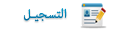
<style>
.page{position:relative;width:115px;height:32px;background:#ffffff}
.page>*{position:absolute;margin:0}
.t1{font:18px "AdobeArabic-Regular";color:#0079ab}
</style>
<div class="page">
<p class="t1" style="left:24px;top:8px;width:43px;height:14px">التسجيـل</p>
</div>
